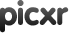
<style>
.page{position:relative;width:69px;height:33px;background:#ffffff}
.page>*{position:absolute;margin:0}
.t1{font:32px "VAGRoundedBlackSSiBlack";letter-spacing:-0.01em;color:#3b3b3b}
.t2{font:32px "VAGRoundedBlackSSiBlack";letter-spacing:0.05em;color:#3b3b3b}
.t3{font:32px "VAGRoundedBlackSSiBlack";letter-spacing:0.005em;color:#3b3b3b}
.t4{font:32px "VAGRoundedBlackSSiBlack";letter-spacing:-0.025em;color:#3b3b3b}
</style>
<div class="page">
<p class="t1" style="left:0px;top:0px;width:69px;height:33px">pi<span class="t2">c</span><span class="t3">x</span><span class="t4">r</span></p>
</div>
